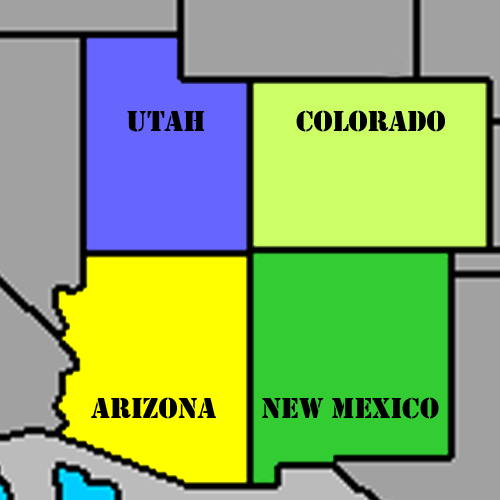
<style>
.page{position:relative;width:500px;height:500px;background:#a1a1a1}
.page>*{position:absolute;margin:0}
.t1{font:30px "Stencil";color:#000000}
</style>
<div class="page">
<p class="t1" style="left:127px;top:110px;width:318px;height:22px">Utah            Colorado</p>
<p class="t1" style="left:91px;top:397px;width:348px;height:22px">Arizona      New Mexico</p>
</div>
